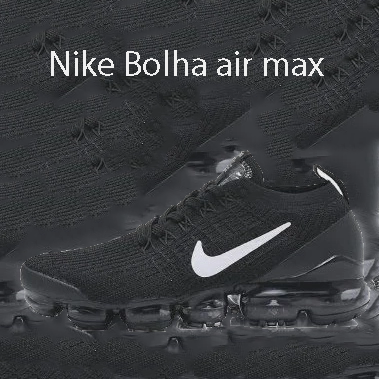
<style>
.page{position:relative;width:379px;height:379px}
.page>*{position:absolute;margin:0}
.t1{font:36px "MyriadPro-Regular";color:#efefef}
</style>
<div class="page">
<p class="t1" style="left:51px;top:50px;width:273px;height:26px">Nike Bolha air max</p>
</div>
